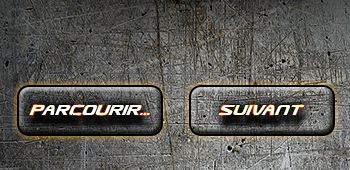
<style>
.page{position:relative;width:350px;height:170px}
.page>*{position:absolute;margin:0}
.t1{font:18px "UsuziItalic";color:#ffffff}
</style>
<div class="page">
<p class="t1" style="left:29px;top:105px;width:121px;height:10px">Parcourir...</p>
<p class="t1" style="left:218px;top:105px;width:87px;height:10px">suivant</p>
</div>
